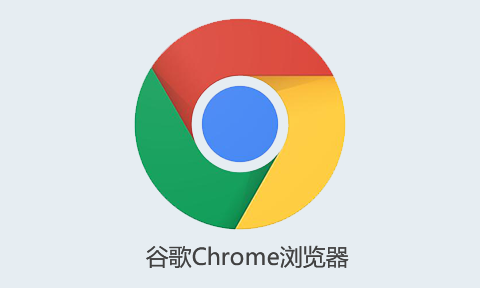
<style>
.page{position:relative;width:480px;height:288px;background:#e6edf2}
.page>*{position:absolute;margin:0}
.t1{font:23px "MicrosoftYaHei";color:#414141}
</style>
<div class="page">
<p class="t1" style="left:146px;top:245px;width:203px;height:23px">谷歌Chrome浏览器</p>
</div>
